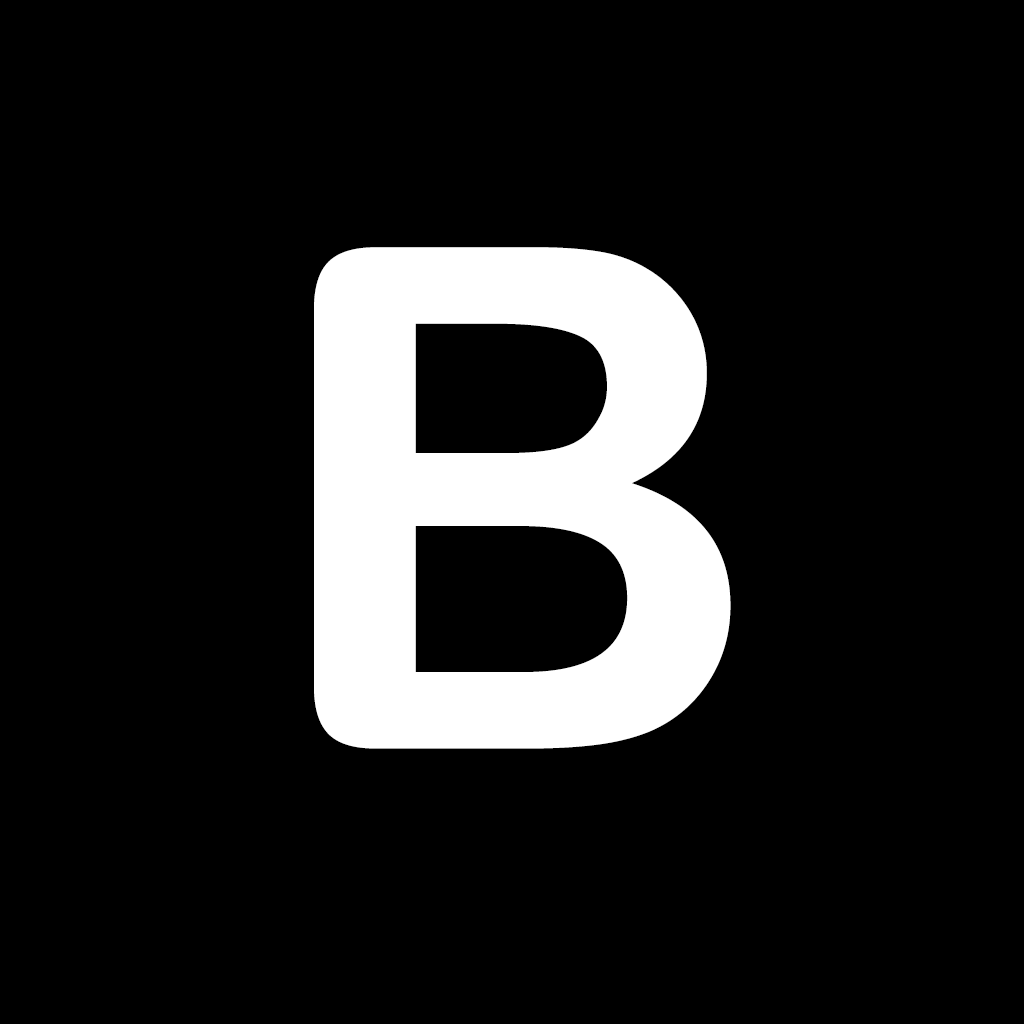
<style>
.page{position:relative;width:1024px;height:1024px;background:#000000}
.page>*{position:absolute;margin:0}
.t1{font:700px "ArialRoundedMTBold";color:#ffffff}
</style>
<div class="page">
<p class="t1" style="left:314px;top:247px;width:417px;height:502px">B</p>
</div>
